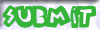
<style>
.page{position:relative;width:100px;height:30px;background:#36b439}
.page>*{position:absolute;margin:0}
.t1{font:22px "woodcutterSummerShadows";letter-spacing:-0.025em;color:#36b439;scale:1.08 1}
</style>
<div class="page">
<p class="t1" style="left:2px;top:5px;width:95px;height:23px">SUBMIT</p>
</div>
